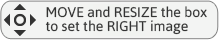
<style>
.page{position:relative;width:219px;height:40px;background:#f3f4f3}
.page>*{position:absolute;margin:0}
.t1{font:14px/14px "Asap-Regular";color:#333333}
</style>
<div class="page">
<p class="t1" style="left:45px;top:6px;width:162px;height:29px">MOVE and RESIZE the box<br>to set the RIGHT image</p>
</div>
